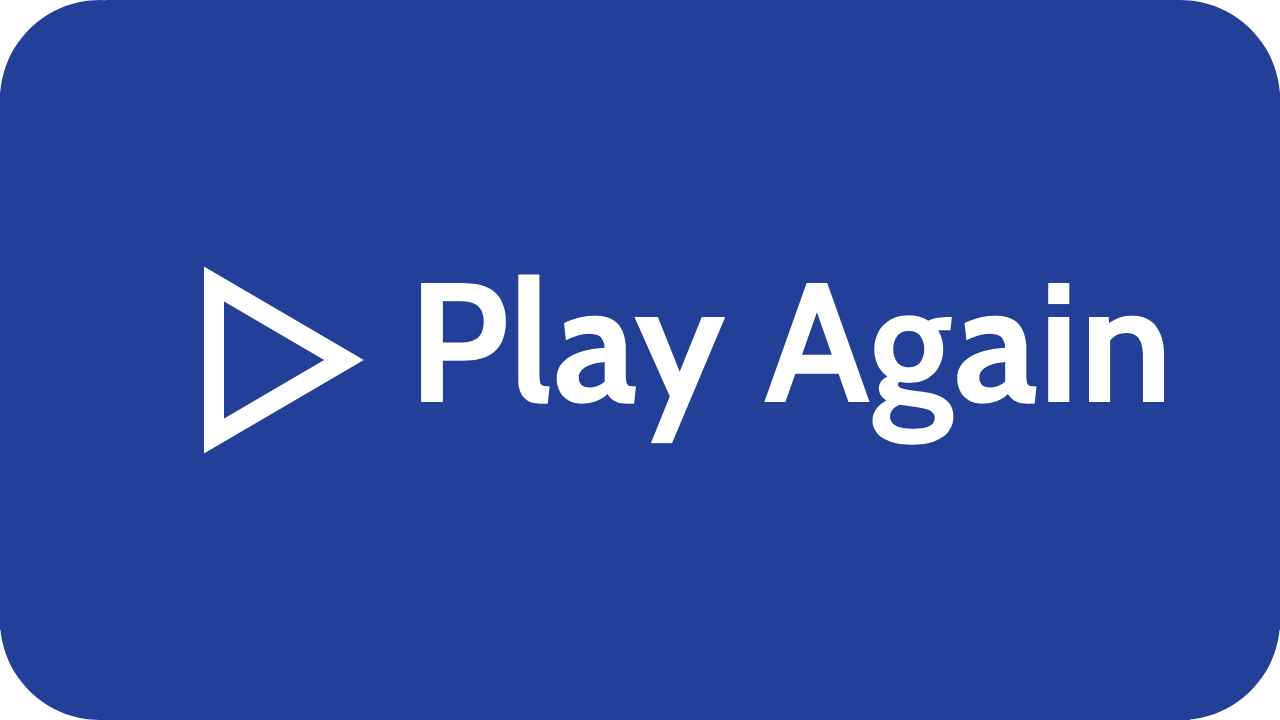
<style>
.page{position:relative;width:1280px;height:720px;background:#234099}
.page>*{position:absolute;margin:0}
.t1{font:170px "Cabin-Bold";color:#ffffff}
</style>
<div class="page">
<p class="t1" style="left:421px;top:274px;width:743px;height:171px">Play Again</p>
</div>
